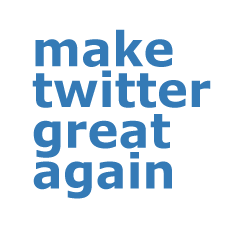
<style>
.page{position:relative;width:230px;height:230px;background:#ffffff}
.page>*{position:absolute;margin:0}
.t1{font:48px/40.8px "Verdana-Bold";color:#347ab6}
</style>
<div class="page">
<p class="t1" style="left:32px;top:29px;width:179px;height:170px">make<br>twitter<br>great<br>again</p>
</div>
